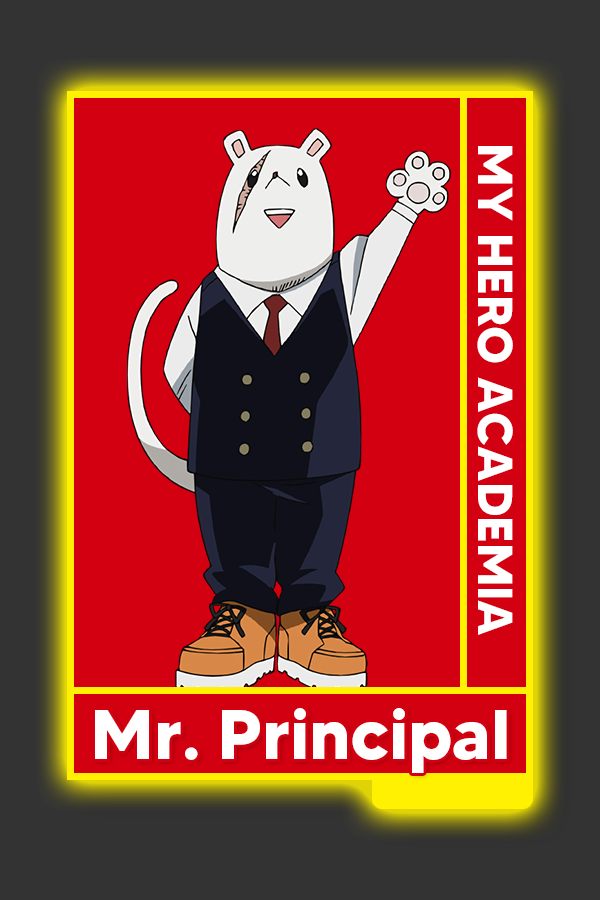
<style>
.page{position:relative;width:600px;height:900px;background:#d20010}
.page>*{position:absolute;margin:0}
.t1{font:48.8px "MADETOMMY-Bold";color:#ffffff}
.t2{font:70.1px "MADETOMMY-Bold";color:#ffffff}
</style>
<div class="page">
<p class="t1" style="left:477px;top:146px;width:36px;height:489px;rotate:90deg">MY HERO ACADEMIA</p>
<p class="t2" style="left:95px;top:708px;width:412px;height:65px">Mr. Principal</p>
</div>
